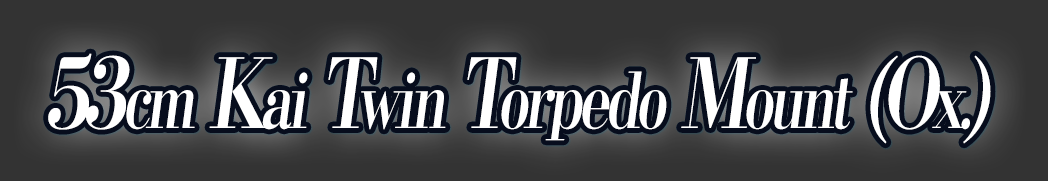
<style>
.page{position:relative;width:1048px;height:181px;background:#333333}
.page>*{position:absolute;margin:0}
.t1{font:76.8px "KochoStd-Heavy";letter-spacing:-0.08em;color:#ffffff;font-style:italic;scale:0.75 1}
.t2{font:96px "KochoStd-Heavy";letter-spacing:-0.08em;color:#ffffff;font-style:italic;scale:0.75 1}
</style>
<div class="page">
<p class="t1" style="left:48px;top:53px;width:943px;height:91px"><span class="t2">53</span>cm<span class="t2"> K</span>ai<span class="t2"> T</span>win<span class="t2"> T</span>orpedo<span class="t2"> M</span>ount<span class="t2"> (O</span>x.<span class="t2">)</span></p>
</div>
